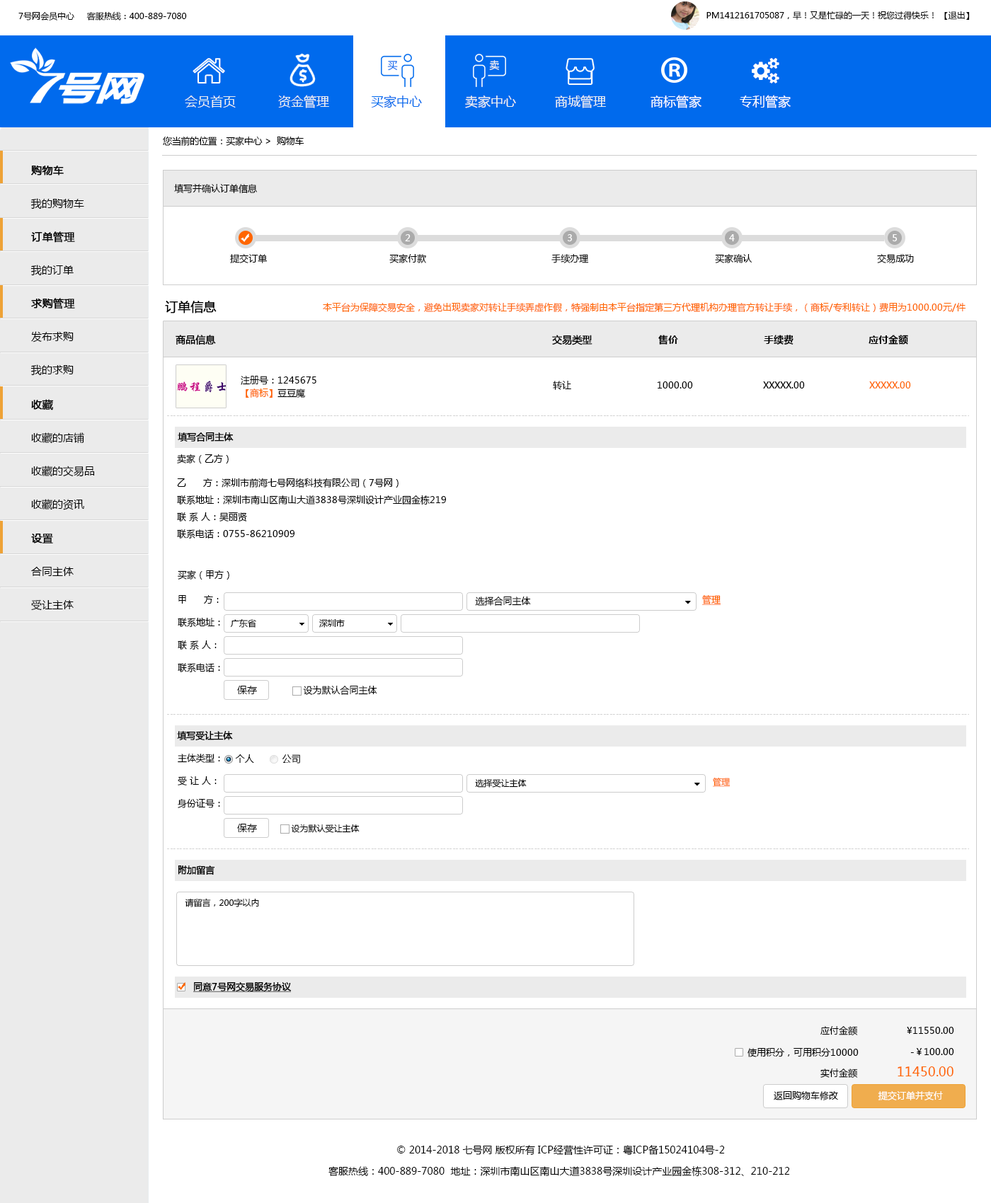
<style>
.page{position:relative;width:991px;height:1203px;background:#ffffff}
.page>*{position:absolute;margin:0}
.t1{font:8.5px "MicrosoftYaHei";color:#000000}
.t2{font:9.9px "MicrosoftYaHei";color:#006aed}
.t3{font:9.9px "MicrosoftYaHei";color:#ecf0f1}
.t4{font:12.7px "MicrosoftYaHei";color:#ecf0f1}
.t5{font:12.7px "MicrosoftYaHei";color:#006aed}
.t6{font:12.7px "MicrosoftYaHei";color:#ffffff}
.t7{font:9.2px "MicrosoftYaHei";letter-spacing:-0.02em;color:#000000}
.t8{font:10.6px/33.3px "MicrosoftYaHei";color:#000000}
.t9{font:10.6px/33.3px "MicrosoftYaHei";color:#000000;font-weight:bold}
.t10{font:9.2px "MicrosoftYaHei";color:#000000}
.t11{font:9.2px "MicrosoftYaHei";color:#ffffff}
.t12{font:12.7px "MicrosoftYaHei";color:#000000;font-weight:bold}
.t13{font:9.2px "MicrosoftYaHei";color:#ff6600}
.t14{font:9.9px "MicrosoftYaHei";color:#000000;font-weight:bold}
.t15{font:9.9px "MicrosoftYaHei-Bold";color:#000000}
.t16{font:9.2px/12.7px "MicrosoftYaHei";color:#000000}
.t17{font:9.2px/12.7px "MicrosoftYaHei";color:#ff6600}
.t18{font:9.2px "MicrosoftYaHei";color:#000000;font-weight:bold}
.t19{font:9.2px/17px "MicrosoftYaHei";color:#000000}
.t20{font:9.2px/22.7px "MicrosoftYaHei";color:#000000}
.t21{font:9.2px "MicrosoftYaHei";color:#ff6600;text-decoration:underline}
.t22{font:9.9px "MicrosoftYaHei";color:#000000}
.t23{font:8.5px "MicrosoftYaHei";color:#ff6600;text-decoration:underline}
.t24{font:9.2px "MicrosoftYaHei";color:#000000;font-weight:bold;text-decoration:underline}
.t25{font:9.2px/21.2px "MicrosoftYaHei";color:#000000}
.t26{font:12.7px/21.2px "MicrosoftYaHei";color:#ff6600}
.t27{font:9.9px/21.2px "MicrosoftYaHei";color:#000000}
</style>
<div class="page">
<p class="t1" style="left:18px;top:11px;width:169px;height:10px">7号网会员中心     客服热线：400-889-7080</p>
<p class="t1" style="left:706px;top:11px;width:264px;height:9px">PM1412161705087，早！又是忙碌的一天！祝您过得快乐！ 【退出】</p>
<p class="t2" style="left:387px;top:61px;width:11px;height:10px">买</p>
<p class="t3" style="left:489px;top:60px;width:11px;height:10px">卖</p>
<p class="t4" style="left:185px;top:96px;width:51px;height:12px">会员首页</p>
<p class="t4" style="left:278px;top:95px;width:51px;height:13px">资金管理</p>
<p class="t5" style="left:371px;top:95px;width:51px;height:13px">买家中心</p>
<p class="t4" style="left:465px;top:95px;width:51px;height:13px">卖家中心</p>
<p class="t4" style="left:555px;top:95px;width:51px;height:13px">商城管理</p>
<p class="t6" style="left:650px;top:95px;width:51px;height:13px">商标管家</p>
<p class="t6" style="left:740px;top:95px;width:51px;height:13px">专利管家</p>
<p class="t7" style="left:163px;top:136px;width:141px;height:10px">您当前的位置：买家中心 &gt;  购物车</p>
<p class="t8" style="left:30px;top:166px;width:54px;height:44px"><span class="t9">购物车<br></span>我的购物车</p>
<p class="t10" style="left:174px;top:184px;width:83px;height:9px">填写并确认订单信息</p>
<p class="t9" style="left:30px;top:231px;width:45px;height:45px">订单管理<br><span class="t8">我的订单</span></p>
<p class="t11" style="left:405px;top:234px;width:6px;height:7px">2</p>
<p class="t11" style="left:568px;top:234px;width:4px;height:7px">3</p>
<p class="t11" style="left:729px;top:234px;width:6px;height:7px">4</p>
<p class="t11" style="left:893px;top:234px;width:4px;height:7px">5</p>
<p class="t10" style="left:230px;top:254px;width:38px;height:9px">提交订单</p>
<p class="t10" style="left:389px;top:254px;width:37px;height:9px">买家付款</p>
<p class="t10" style="left:551px;top:254px;width:38px;height:9px">手续办理</p>
<p class="t10" style="left:715px;top:254px;width:37px;height:9px">买家确认</p>
<p class="t10" style="left:877px;top:254px;width:37px;height:9px">交易成功</p>
<p class="t8" style="left:30px;top:298px;width:45px;height:78px"><span class="t9">求购管理<br></span>发布求购<br>我的求购</p>
<p class="t12" style="left:165px;top:301px;width:52px;height:13px">订单信息</p>
<p class="t13" style="left:323px;top:302px;width:642px;height:10px">本平台为保障交易安全，避免出现卖家对转让手续弄虚作假，特强制由本平台指定第三方代理机构办理官方转让手续，（商标/专利转让）费用为1000.00元/件</p>
<p class="t14" style="left:176px;top:335px;width:40px;height:10px">商品信息</p>
<p class="t14" style="left:552px;top:335px;width:40px;height:10px">交易类型</p>
<p class="t15" style="left:658px;top:335px;width:20px;height:10px">售价</p>
<p class="t15" style="left:764px;top:335px;width:29px;height:10px">手续费</p>
<p class="t15" style="left:869px;top:335px;width:39px;height:10px">应付金额</p>
<p class="t16" style="left:241px;top:376px;width:75px;height:22px">注册号：1245675<br><span class="t17">【商标】</span>豆豆魔</p>
<p class="t10" style="left:553px;top:381px;width:18px;height:9px">转让</p>
<p class="t10" style="left:658px;top:382px;width:35px;height:7px">1000.00</p>
<p class="t10" style="left:763px;top:382px;width:42px;height:7px">XXXXX.00</p>
<p class="t13" style="left:869px;top:382px;width:42px;height:7px">XXXXX.00</p>
<p class="t8" style="left:31px;top:399px;width:64px;height:111px"><span class="t9">收藏<br></span>收藏的店铺<br>收藏的交易品<br>收藏的资讯</p>
<p class="t18" style="left:178px;top:432px;width:56px;height:10px">填写合同主体</p>
<p class="t10" style="left:177px;top:454px;width:52px;height:10px">卖家（乙方）</p>
<p class="t19" style="left:177px;top:478px;width:269px;height:61px">乙      方：深圳市前海七号网络科技有限公司（7号网）<br>联系地址：深圳市南山区南山大道3838号深圳设计产业园金栋219<br>联 系 人：吴丽贤<br>联系电话：0755-86210909</p>
<p class="t8" style="left:31px;top:534px;width:43px;height:77px"><span class="t9">设置<br></span>合同主体<br>受让主体</p>
<p class="t10" style="left:178px;top:571px;width:51px;height:9px">买家（甲方）</p>
<p class="t20" style="left:178px;top:595px;width:42px;height:77px">甲      方：<br>联系地址：<br>联 系 人：<br>联系电话：</p>
<p class="t10" style="left:475px;top:597px;width:56px;height:9px">选择合同主体</p>
<p class="t21" style="left:702px;top:595px;width:19px;height:10px">管理</p>
<p class="t1" style="left:230px;top:619px;width:26px;height:9px">广东省</p>
<p class="t1" style="left:319px;top:619px;width:26px;height:9px">深圳市</p>
<p class="t22" style="left:237px;top:686px;width:20px;height:8px">保存</p>
<p class="t10" style="left:303px;top:686px;width:74px;height:9px">设为默认合同主体</p>
<p class="t18" style="left:177px;top:731px;width:56px;height:10px">填写受让主体</p>
<p class="t20" style="left:178px;top:754px;width:42px;height:54px">主体类型：<br>受 让 人：<br>身份证号：</p>
<p class="t10" style="left:235px;top:755px;width:65px;height:9px">个人          公司</p>
<p class="t1" style="left:475px;top:779px;width:52px;height:9px">选择受让主体</p>
<p class="t23" style="left:713px;top:777px;width:17px;height:10px">管理</p>
<p class="t22" style="left:237px;top:824px;width:20px;height:8px">保存</p>
<p class="t1" style="left:291px;top:824px;width:69px;height:9px">设为默认受让主体</p>
<p class="t18" style="left:178px;top:866px;width:37px;height:10px">附加留言</p>
<p class="t1" style="left:185px;top:898px;width:74px;height:9px">请留言，200字以内</p>
<p class="t24" style="left:193px;top:982px;width:99px;height:10px">同意7号网交易服务协议</p>
<p class="t25" style="left:820px;top:1026px;width:38px;height:53px;text-align:right">应付金额<br><br>实付金额</p>
<p class="t25" style="left:898px;top:1027px;width:56px;height:50px;text-align:right">¥11550.00<br>-￥100.00<br><span class="t26">11450.00</span></p>
<p class="t10" style="left:747px;top:1048px;width:112px;height:9px">使用积分，可用积分10000</p>
<p class="t10" style="left:774px;top:1091px;width:64px;height:10px">返回购物车修改</p>
<p class="t11" style="left:878px;top:1091px;width:65px;height:10px">提交订单并支付</p>
<p class="t27" style="left:328px;top:1145px;width:462px;height:32px;text-align:center">© 2014-2018 七号网 版权所有 ICP经营性许可证：粤ICP备15024104号-2<br>客服热线：400-889-7080  地址：深圳市南山区南山大道3838号深圳设计产业园金栋308-312、210-212</p>
</div>
